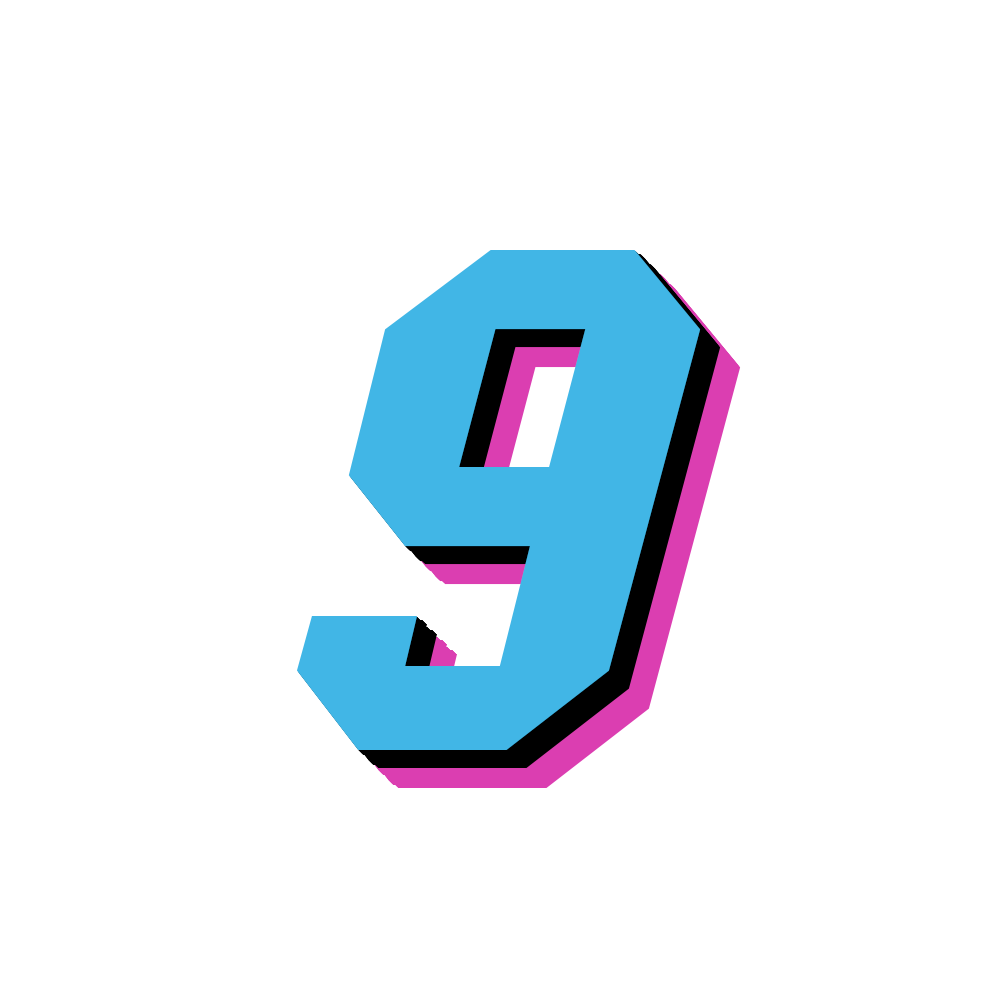
<style>
.page{position:relative;width:1000px;height:1000px;background:#ffffff}
.page>*{position:absolute;margin:0}
.t1{font:625px "NBAHeat";color:#41b6e6}
</style>
<div class="page">
<p class="t1" style="left:297px;top:250px;width:404px;height:500px">9</p>
</div>
